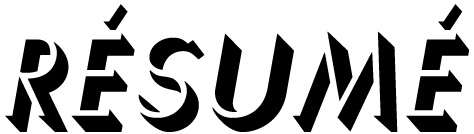
<style>
.page{position:relative;width:474px;height:134px;background:#ffffff}
.page>*{position:absolute;margin:0}
.t1{font:130px "UmbraStd";color:#000000;font-style:italic}
</style>
<div class="page">
<p class="t1" style="left:5px;top:4px;width:465px;height:128px">résumé</p>
</div>
